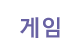
<style>
.page{position:relative;width:82px;height:51px;background:#ffffff}
.page>*{position:absolute;margin:0}
.t1{font:22px "MalgunGothicBold";color:#6861a3}
</style>
<div class="page">
<p class="t1" style="left:20px;top:17px;width:40px;height:21px">게임</p>
</div>
